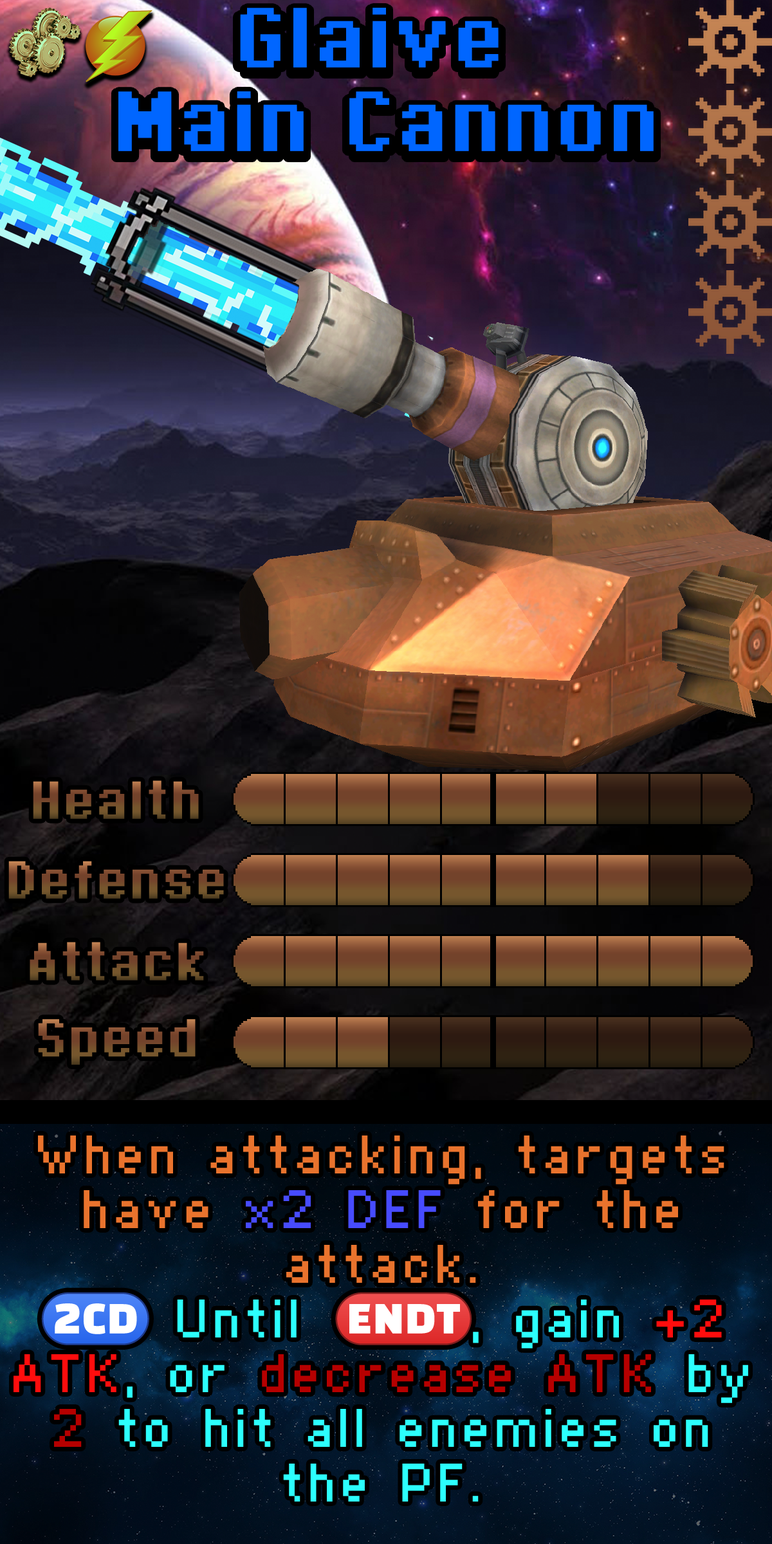
<style>
.page{position:relative;width:772px;height:1544px}
.page>*{position:absolute;margin:0}
.t1{font:113.2px/83.6px "Supertext03Bold";color:#0066ff}
.t2{font:70.8px "Supertext03Bold";color:#754c2c}
.t3{font:70.8px "Supertext03Bold";color:#744c2c}
.t4{font:70.8px "Supertext03Bold";color:#754d2c}
.t5{font:70.8px "Supertext03Bold";color:#764e2d}
.t6{font:92.7px/54.7px "Supertext01";color:#2cfffd}
.t7{font:92.7px/54.7px "Supertext01";color:#e9732d}
.t8{font:92.7px/54.7px "Supertext01";color:#474bff}
.t9{font:92.7px/54.7px "stoogedings-Regular";color:#2cfffd}
.t10{font:92.7px/54.7px "Supertext01";color:#ff0d0d}
.t11{font:92.7px/54.7px "Supertext01";color:#b60000}
</style>
<div class="page">
<p class="t1" style="left:118px;top:8px;width:536px;height:143px;text-align:center">Glaive <br>Main Cannon</p>
<p class="t2" style="left:33px;top:781px;width:166px;height:38px">Health</p>
<p class="t3" style="left:8px;top:861px;width:216px;height:38px">Defense</p>
<p class="t4" style="left:30px;top:942px;width:174px;height:39px">Attack</p>
<p class="t5" style="left:38px;top:1019px;width:158px;height:46px">Speed</p>
<p class="t6" style="left:14px;top:1136px;width:734px;height:366px;text-align:center"><span class="t7">When attacking, targets have </span><span class="t8">x2 DEF </span><span class="t7">for the attack.<br></span><span class="t9">(2CD)</span> Until <span class="t9">(ENDT)</span>, gain <span class="t10">+2 ATK</span>, or <span class="t11">decrease ATK</span> by <span class="t11">2</span> to hit all enemies on the PF.</p>
</div>
